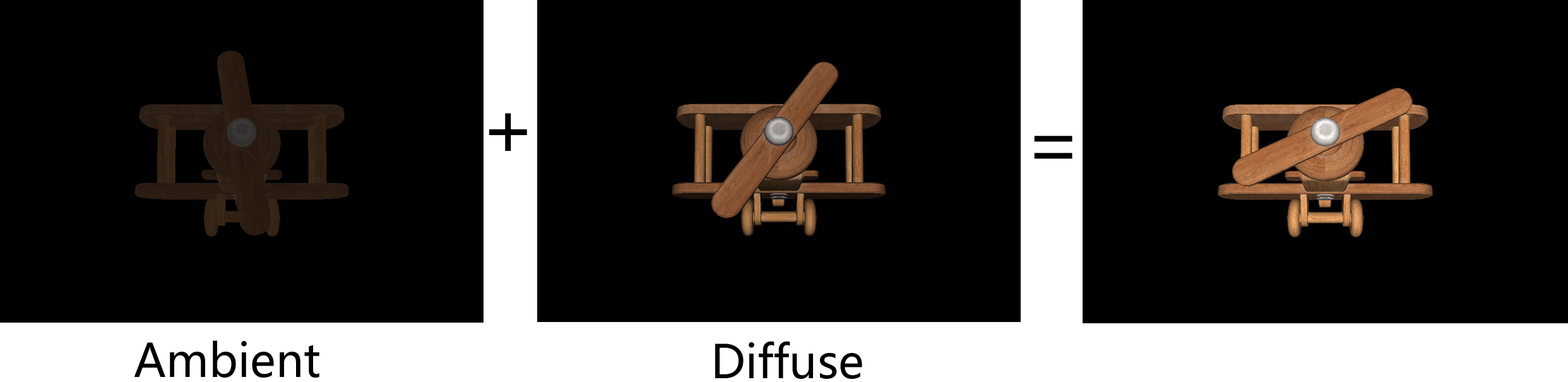
<style>
.page{position:relative;width:1568px;height:382px;background:#000000}
.page>*{position:absolute;margin:0}
.t1{font:75.7px "MicrosoftYaHei";color:#000000}
.t2{font:45.4px "MicrosoftYaHei";color:#000000}
</style>
<div class="page">
<p class="t1" style="left:489px;top:113px;width:38px;height:38px">+</p>
<p class="t1" style="left:1034px;top:136px;width:38px;height:23px">=</p>
<p class="t2" style="left:134px;top:340px;width:185px;height:37px">Ambient</p>
<p class="t2" style="left:715px;top:341px;width:147px;height:38px">Diffuse</p>
</div>
